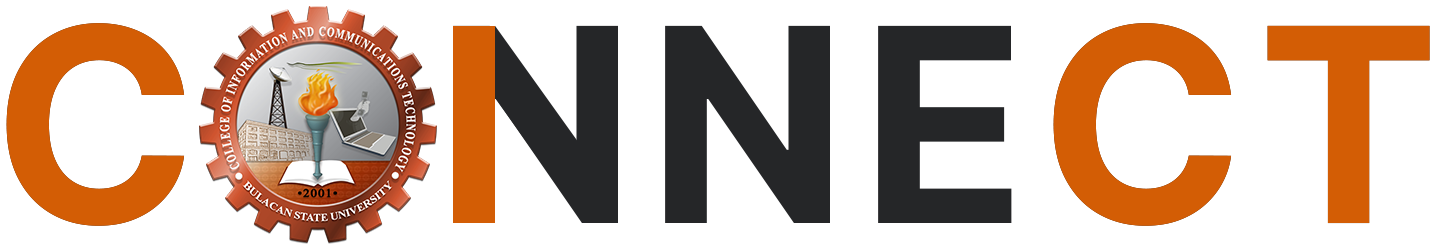
<style>
.page{position:relative;width:1436px;height:250px;background:#ffffff}
.page>*{position:absolute;margin:0}
.t1{font:270.8px "Inter-Bold";letter-spacing:0.05em}
.t2{font:270.8px "Inter-Bold";letter-spacing:0.05em;color:#d35d05}
</style>
<div class="page">
<p class="t1" style="left:6px;top:23px;width:1424px;height:203px">CONNECT</p>
<p class="t2" style="left:6px;top:23px;width:179px;height:203px">C</p>
<p class="t2" style="left:1053px;top:23px;width:179px;height:203px">C</p>
<p class="t2" style="left:1267px;top:25px;width:163px;height:198px">T</p>
</div>
